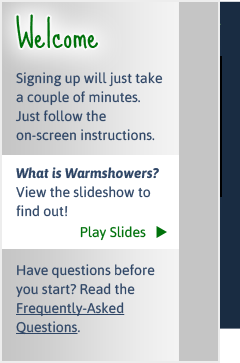
<style>
.page{position:relative;width:240px;height:363px}
.page>*{position:absolute;margin:0}
.t1{font:36px "SueEllenFrancisco";color:#00720b}
.t2{font:14px/19px "Asap-Regular";color:#304767}
.t3{font:14px/19px "Asap-BoldItalic";color:#304767}
.t4{font:14px/19px "Asap-Regular";color:#00720b}
.t5{font:14px/19px "Asap-Regular";color:#304767;text-decoration:underline}
</style>
<div class="page">
<p class="t1" style="left:16px;top:14px;width:82px;height:35px">Welcome</p>
<p class="t2" style="left:15px;top:72px;width:148px;height:263px">Signing up will just take a couple of minutes. Just follow the on-screen instructions. <br><br><span class="t3">What is Warmshowers?</span> View the slideshow to find out!<br>                   <span class="t4">Play Slides</span> <br><br>Have questions before you start? Read the <span class="t5">Frequently-Asked Questions</span>.</p>
</div>
